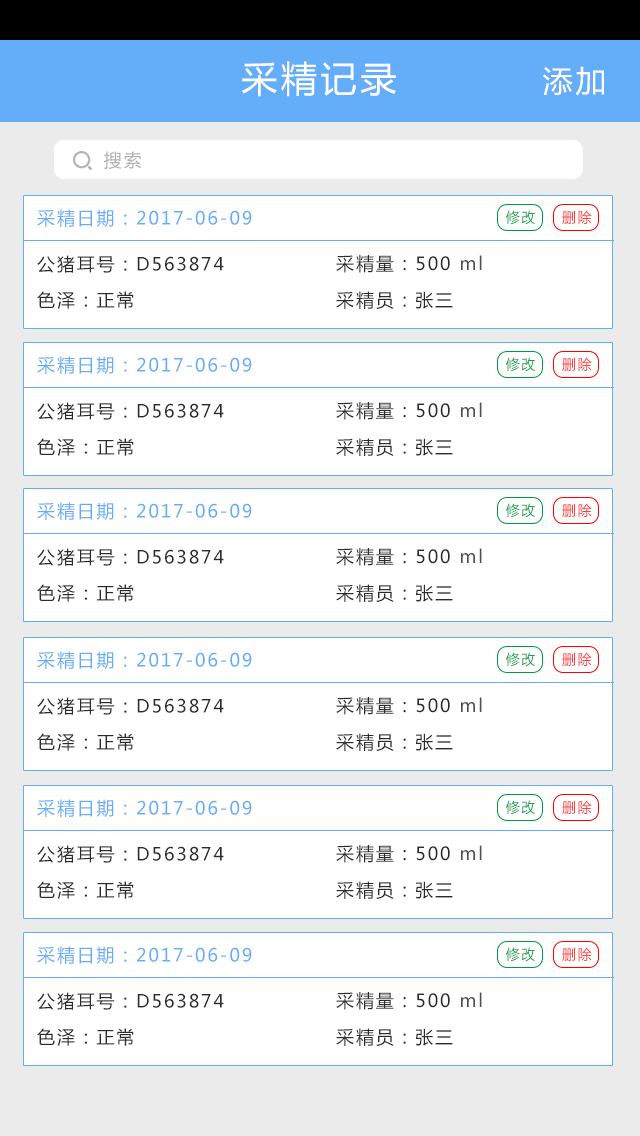
<style>
.page{position:relative;width:640px;height:1136px;background:#ffffff}
.page>*{position:absolute;margin:0}
.t1{font:36px "MicrosoftYaHei";letter-spacing:0.1em;color:#ffffff}
.t2{font:30px "MicrosoftYaHei";letter-spacing:0.1em;color:#ffffff}
.t3{font:18px "MicrosoftYaHei";letter-spacing:0.1em;color:#b0b0b0}
.t4{font:18px "MicrosoftYaHei";letter-spacing:0.1em;color:#64adf9}
.t5{font:14px "MicrosoftYaHei";letter-spacing:0.1em;color:#16a254}
.t6{font:14px "MicrosoftYaHei";letter-spacing:0.1em;color:#ff3f3f}
.t7{font:18px "MicrosoftYaHei";letter-spacing:0.1em;color:#2b2b2b}
.t8{font:18px "MicrosoftYaHei";letter-spacing:0.1em;color:#505050}
</style>
<div class="page">
<p class="t1" style="left:241px;top:61px;width:155px;height:36px">采精记录</p>
<p class="t2" style="left:543px;top:66px;width:61px;height:30px">添加</p>
<p class="t3" style="left:104px;top:151px;width:38px;height:18px">搜索</p>
<p class="t4" style="left:37px;top:209px;width:215px;height:18px">采精日期：2017-06-09</p>
<p class="t5" style="left:505px;top:210px;width:30px;height:15px">修改</p>
<p class="t6" style="left:562px;top:210px;width:30px;height:15px">删除</p>
<p class="t7" style="left:37px;top:255px;width:187px;height:18px">公猪耳号：D563874</p>
<p class="t7" style="left:336px;top:255px;width:146px;height:18px">采精量：500 <span class="t8">ml</span></p>
<p class="t7" style="left:37px;top:291px;width:97px;height:18px">色泽：正常</p>
<p class="t7" style="left:336px;top:291px;width:117px;height:18px">采精员：张三</p>
<p class="t4" style="left:37px;top:356px;width:215px;height:18px">采精日期：2017-06-09</p>
<p class="t5" style="left:505px;top:357px;width:30px;height:15px">修改</p>
<p class="t6" style="left:562px;top:357px;width:30px;height:15px">删除</p>
<p class="t7" style="left:37px;top:402px;width:187px;height:18px">公猪耳号：D563874</p>
<p class="t7" style="left:336px;top:402px;width:146px;height:18px">采精量：500 <span class="t8">ml</span></p>
<p class="t7" style="left:37px;top:438px;width:97px;height:18px">色泽：正常</p>
<p class="t7" style="left:336px;top:438px;width:117px;height:18px">采精员：张三</p>
<p class="t4" style="left:37px;top:502px;width:215px;height:18px">采精日期：2017-06-09</p>
<p class="t5" style="left:505px;top:503px;width:30px;height:15px">修改</p>
<p class="t6" style="left:562px;top:503px;width:30px;height:15px">删除</p>
<p class="t7" style="left:37px;top:548px;width:187px;height:18px">公猪耳号：D563874</p>
<p class="t7" style="left:336px;top:548px;width:146px;height:18px">采精量：500 <span class="t8">ml</span></p>
<p class="t7" style="left:37px;top:584px;width:97px;height:18px">色泽：正常</p>
<p class="t7" style="left:336px;top:584px;width:117px;height:18px">采精员：张三</p>
<p class="t4" style="left:37px;top:651px;width:215px;height:18px">采精日期：2017-06-09</p>
<p class="t5" style="left:505px;top:652px;width:30px;height:15px">修改</p>
<p class="t6" style="left:562px;top:652px;width:30px;height:15px">删除</p>
<p class="t7" style="left:37px;top:697px;width:187px;height:18px">公猪耳号：D563874</p>
<p class="t7" style="left:336px;top:697px;width:146px;height:18px">采精量：500 <span class="t8">ml</span></p>
<p class="t7" style="left:37px;top:733px;width:97px;height:18px">色泽：正常</p>
<p class="t7" style="left:336px;top:733px;width:117px;height:18px">采精员：张三</p>
<p class="t4" style="left:37px;top:799px;width:215px;height:18px">采精日期：2017-06-09</p>
<p class="t5" style="left:505px;top:800px;width:30px;height:15px">修改</p>
<p class="t6" style="left:562px;top:800px;width:30px;height:15px">删除</p>
<p class="t7" style="left:37px;top:845px;width:187px;height:18px">公猪耳号：D563874</p>
<p class="t7" style="left:336px;top:845px;width:146px;height:18px">采精量：500 <span class="t8">ml</span></p>
<p class="t7" style="left:37px;top:881px;width:97px;height:18px">色泽：正常</p>
<p class="t7" style="left:336px;top:881px;width:117px;height:18px">采精员：张三</p>
<p class="t4" style="left:37px;top:946px;width:215px;height:18px">采精日期：2017-06-09</p>
<p class="t5" style="left:505px;top:947px;width:30px;height:15px">修改</p>
<p class="t6" style="left:562px;top:947px;width:30px;height:15px">删除</p>
<p class="t7" style="left:37px;top:992px;width:187px;height:18px">公猪耳号：D563874</p>
<p class="t7" style="left:336px;top:992px;width:146px;height:18px">采精量：500 <span class="t8">ml</span></p>
<p class="t7" style="left:37px;top:1028px;width:97px;height:18px">色泽：正常</p>
<p class="t7" style="left:336px;top:1028px;width:117px;height:18px">采精员：张三</p>
</div>
